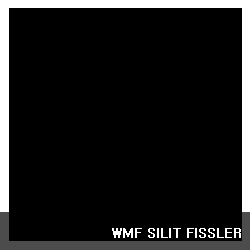
<style>
.page{position:relative;width:250px;height:250px;background:#000000}
.page>*{position:absolute;margin:0}
.t1{font:12px "Gulim";color:#ffffff;text-transform:uppercase;font-weight:bold}
</style>
<div class="page">
<p class="t1" style="left:112px;top:228px;width:129px;height:10px">wmf silit fissler</p>
</div>
